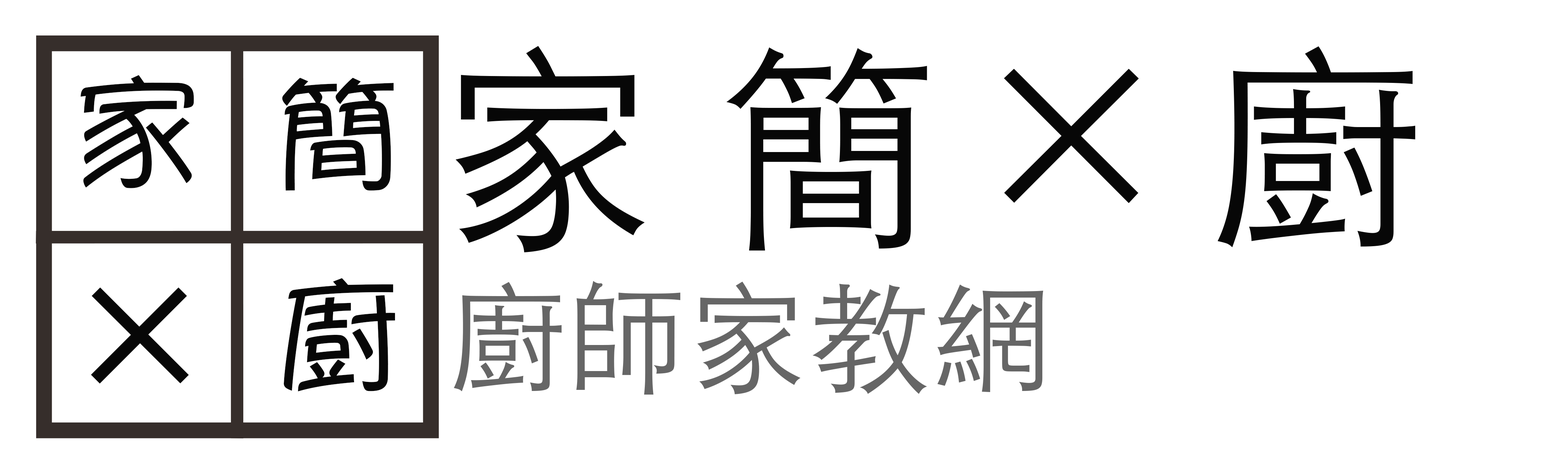
<style>
.page{position:relative;width:1568px;height:463px;background:#ffffff}
.page>*{position:absolute;margin:0}
.t1{font:221.2px "STHeitiTC-Light";color:#070707}
.t2{font:132.3px "YuppyTC-Regular";color:#070707}
.t3{font:120.7px "STHeitiTC-Light";color:#666666}
.t4{font:183.8px "YuppyTC-Regular";color:#070707}
</style>
<div class="page">
<p class="t1" style="left:455px;top:46px;width:960px;height:206px">家 簡 × 廚</p>
<p class="t2" style="left:80px;top:75px;width:114px;height:113px">家</p>
<p class="t2" style="left:282px;top:77px;width:112px;height:114px">簡</p>
<p class="t2" style="left:283px;top:278px;width:112px;height:114px">廚</p>
<p class="t3" style="left:454px;top:281px;width:589px;height:114px">廚師家教網</p>
<p class="t4" style="left:91px;top:287px;width:98px;height:97px">×</p>
</div>
